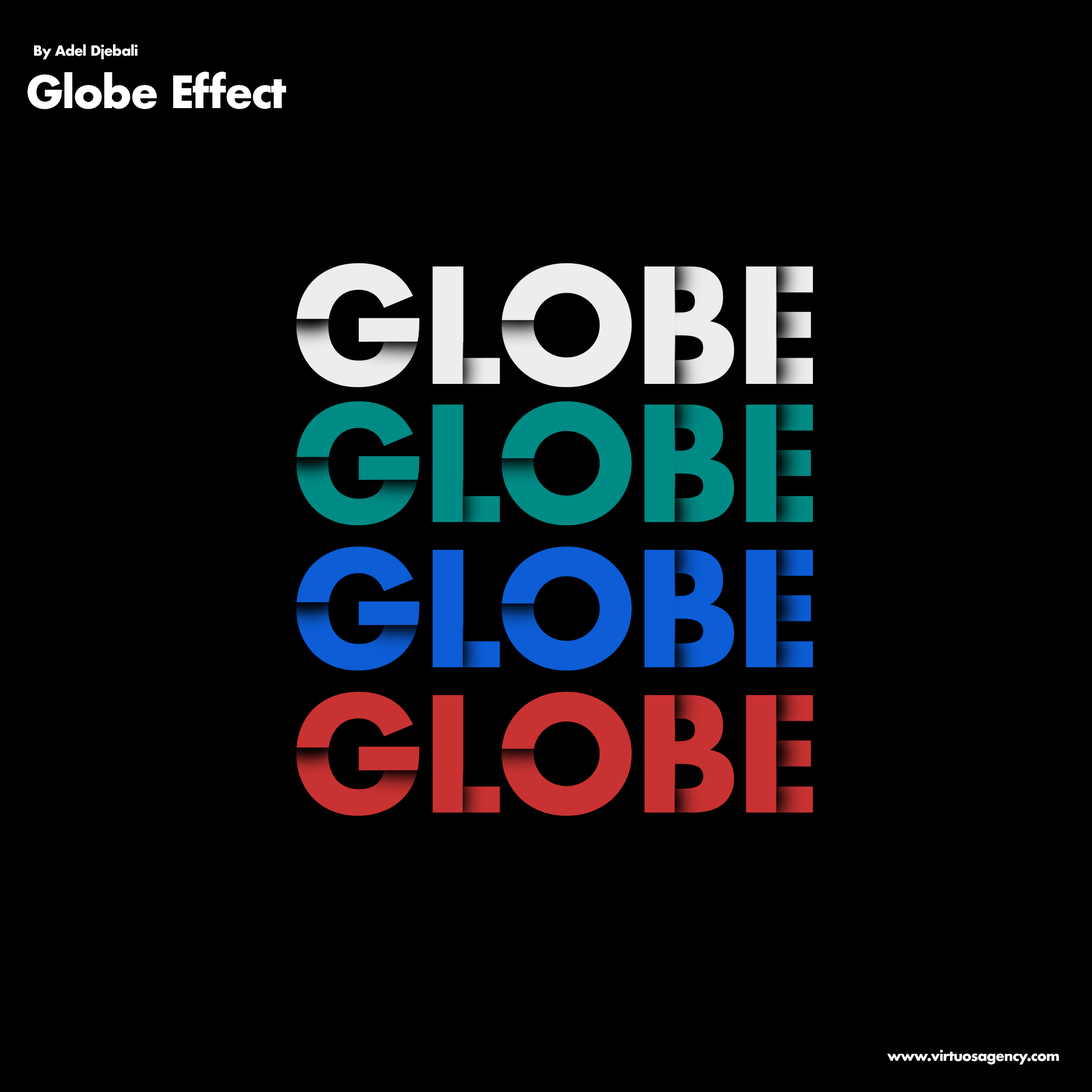
<style>
.page{position:relative;width:1092px;height:1092px;background:#000000}
.page>*{position:absolute;margin:0}
.t1{font:13.6px "Futura-Bold";letter-spacing:-0.04em;color:#ffffff}
.t2{font:43.2px "Futura-Bold";letter-spacing:-0.04em;color:#ffffff}
.t3{font:155.7px "Futura-Bold";letter-spacing:-0.04em;color:#ededed}
.t4{font:155.7px "Futura-Bold";letter-spacing:-0.04em;color:#018b86}
.t5{font:155.7px "Futura-Bold";letter-spacing:-0.04em;color:#0c5dd6}
.t6{font:155.7px "Futura-Bold";letter-spacing:-0.04em;color:#c93232}
</style>
<div class="page">
<p class="t1" style="left:34px;top:44px;width:104px;height:16px">By Adel Djebali</p>
<p class="t2" style="left:27px;top:72px;width:259px;height:37px">Globe Effect</p>
<p class="t3" style="left:296px;top:263px;width:517px;height:124px">GLOBE</p>
<p class="t4" style="left:296px;top:401px;width:517px;height:124px">GLOBE</p>
<p class="t5" style="left:296px;top:547px;width:517px;height:123px">GLOBE</p>
<p class="t6" style="left:296px;top:692px;width:517px;height:124px">GLOBE</p>
<p class="t1" style="left:887px;top:1049px;width:172px;height:16px">www.virtuosagency.com</p>
</div>
